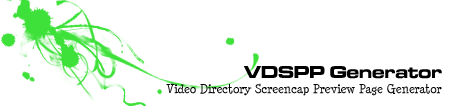
<style>
.page{position:relative;width:453px;height:106px;background:#ffffff}
.page>*{position:absolute;margin:0}
.t1{font:18px "MicrogrammaD-BoldExte";color:#000000}
.t2{font:12px "MinyaNouvelle";color:#000000}
</style>
<div class="page">
<p class="t1" style="left:243px;top:66px;width:199px;height:13px">VDSPP Generator</p>
<p class="t2" style="left:166px;top:83px;width:276px;height:13px">Video Directory Screencap Preview Page Generator</p>
</div>
